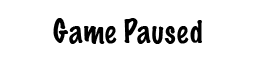
<style>
.page{position:relative;width:256px;height:64px;background:#ffffff}
.page>*{position:absolute;margin:0}
.t1{font:30px "MarkerFelt-Thin";color:#000000}
</style>
<div class="page">
<p class="t1" style="left:53px;top:18px;width:149px;height:26px">Game Paused</p>
</div>
